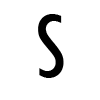
<style>
.page{position:relative;width:100px;height:100px;background:#ffffff}
.page>*{position:absolute;margin:0}
.t1{font:100px "TwCenMT-Condensed";color:#000000}
</style>
<div class="page">
<p class="t1" style="left:38px;top:14px;width:26px;height:64px">S</p>
</div>
